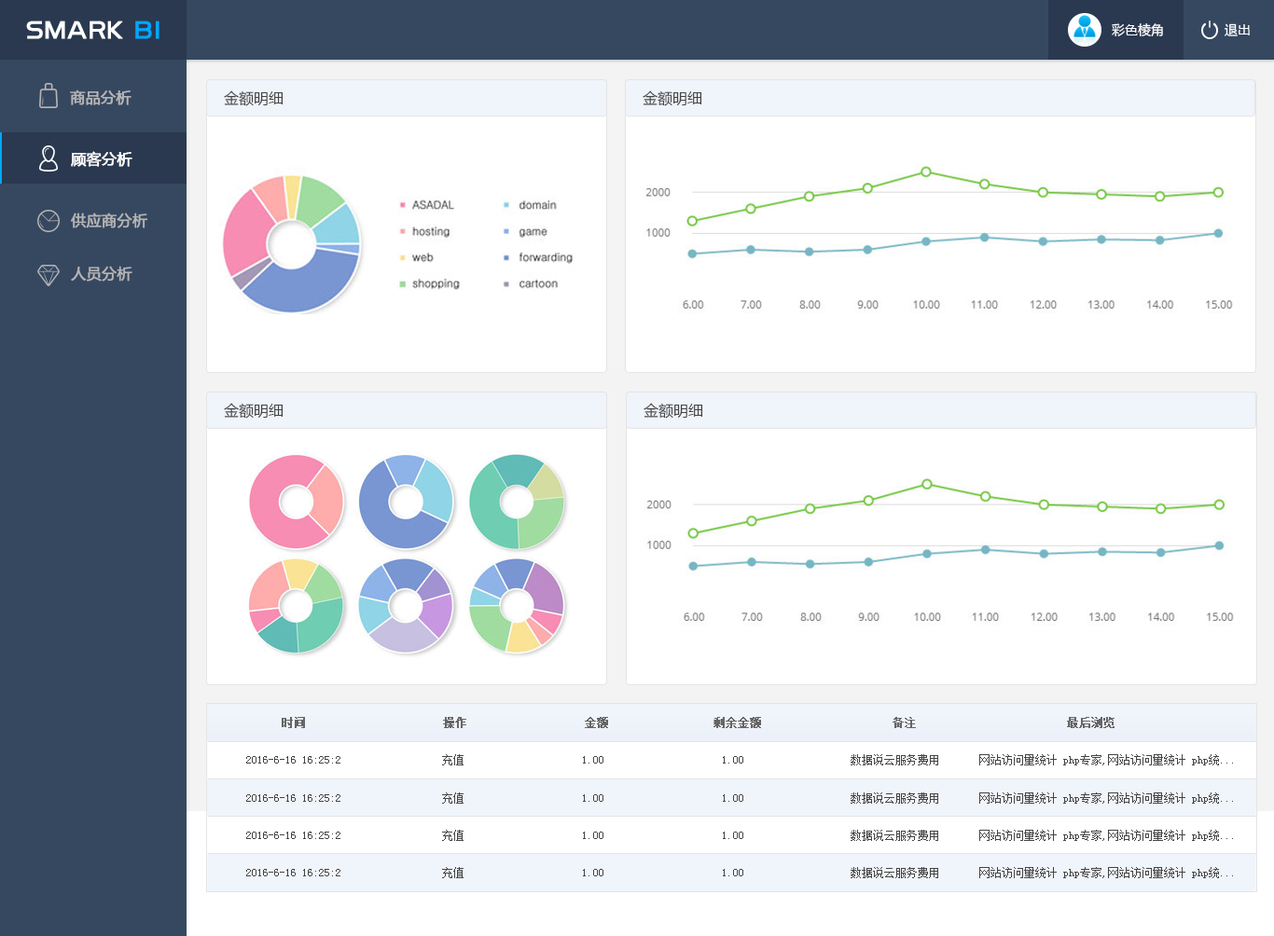
<style>
.page{position:relative;width:1274px;height:936px;background:#ffffff}
.page>*{position:absolute;margin:0}
.t1{font:26.1px "BDZYJT--GB1-0";letter-spacing:0.05em;color:#ffffff;font-weight:bold}
.t2{font:26.1px "BDZYJT--GB1-0";letter-spacing:0.05em;color:#00a7fd;font-weight:bold}
.t3{font:13.1px "MicrosoftYaHei";color:#ffffff}
.t4{font:14.9px "MicrosoftYaHei";color:#b6b5b5;font-weight:bold}
.t5{font:14.9px "MicrosoftYaHei";color:#444444}
.t6{font:14.9px "MicrosoftYaHei";color:#ffffff;font-weight:bold}
.t7{font:14.9px "MicrosoftYaHei";color:#b5b5b5;font-weight:bold}
.t8{font:11.2px "SimSun";color:#666666;font-weight:bold}
.t9{font:11.2px "SimSun";color:#444444}
</style>
<div class="page">
<p class="t1" style="left:26px;top:21px;width:133px;height:18px">SMARK <span class="t2">BI</span></p>
<p class="t3" style="left:1111px;top:23px;width:52px;height:13px">彩色棱角</p>
<p class="t3" style="left:1224px;top:23px;width:25px;height:13px">退出</p>
<p class="t4" style="left:70px;top:90px;width:61px;height:15px">商品分析</p>
<p class="t5" style="left:224px;top:90px;width:59px;height:16px">金额明细</p>
<p class="t5" style="left:642px;top:90px;width:60px;height:16px">金额明细</p>
<p class="t6" style="left:71px;top:151px;width:61px;height:16px">顾客分析</p>
<p class="t7" style="left:71px;top:213px;width:77px;height:15px">供应商分析</p>
<p class="t7" style="left:71px;top:266px;width:61px;height:16px">人员分析</p>
<p class="t5" style="left:224px;top:403px;width:59px;height:16px">金额明细</p>
<p class="t5" style="left:643px;top:403px;width:60px;height:16px">金额明细</p>
<p class="t8" style="left:282px;top:717px;width:832px;height:11px">时间                     操作                  金额                剩余金额                    备注                       最后浏览</p>
<p class="t9" style="left:246px;top:754px;width:987px;height:12px">2016-6-16 16:25:2                  充值                     1.00                     1.00                   数据说云服务费用       网站访问量统计 php专家,网站访问量统计 php统...</p>
<p class="t9" style="left:246px;top:793px;width:987px;height:11px">2016-6-16 16:25:2                  充值                     1.00                     1.00                   数据说云服务费用       网站访问量统计 php专家,网站访问量统计 php统...</p>
<p class="t9" style="left:246px;top:830px;width:987px;height:11px">2016-6-16 16:25:2                  充值                     1.00                     1.00                   数据说云服务费用       网站访问量统计 php专家,网站访问量统计 php统...</p>
<p class="t9" style="left:246px;top:867px;width:987px;height:11px">2016-6-16 16:25:2                  充值                     1.00                     1.00                   数据说云服务费用       网站访问量统计 php专家,网站访问量统计 php统...</p>
</div>
